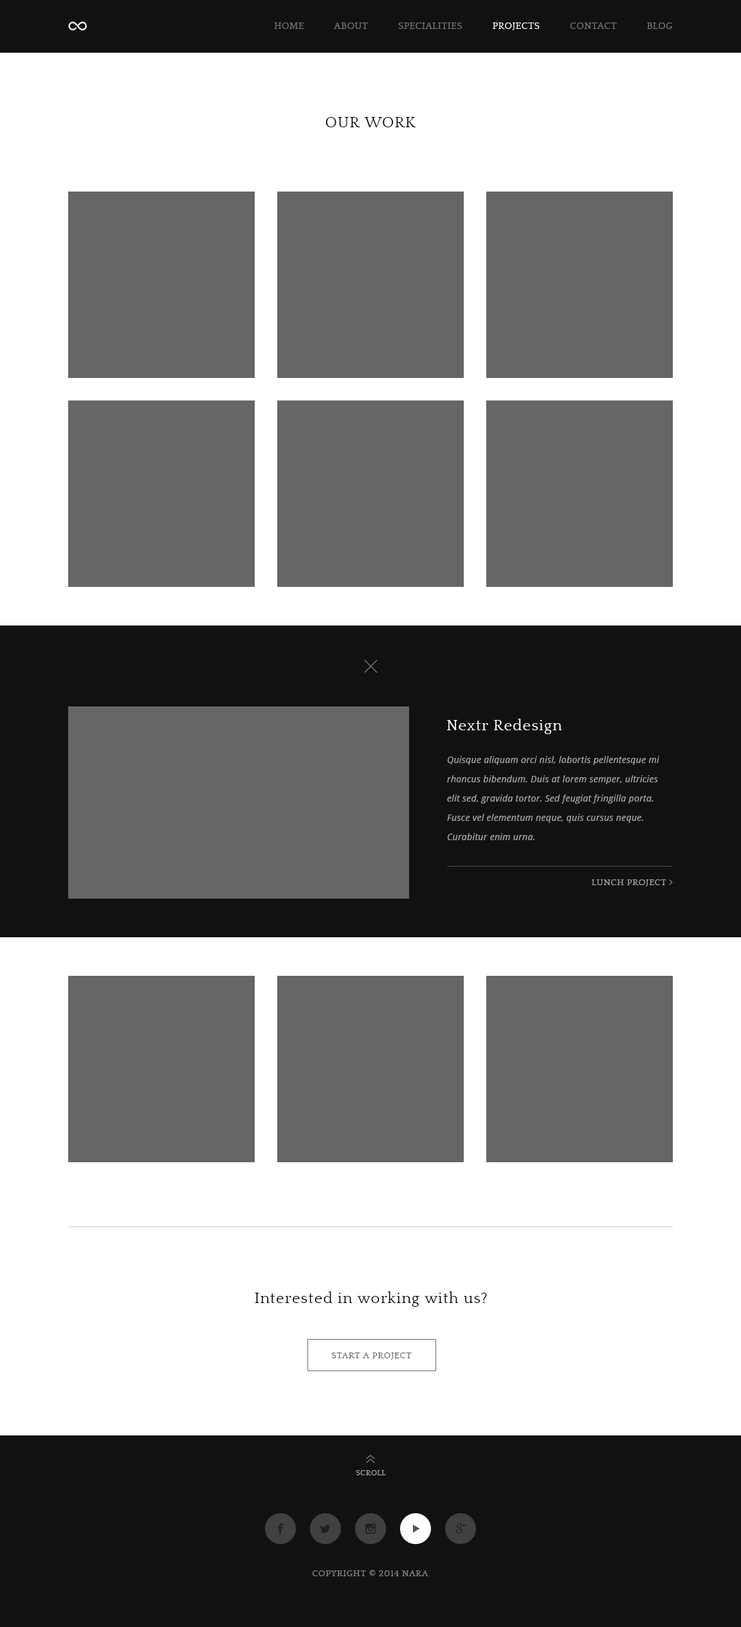
<style>
.page{position:relative;width:741px;height:1627px;background:#ffffff}
.page>*{position:absolute;margin:0}
.t1{font:9.6px "Quattrocento";letter-spacing:0.04em;color:#777777;text-transform:uppercase}
.t2{font:9.6px "Quattrocento";letter-spacing:0.04em;color:#ffffff;text-transform:uppercase}
.t3{font:15.4px "Quattrocento";letter-spacing:0.05em;color:#000000}
.t4{font:15.4px "Quattrocento";letter-spacing:0.05em;color:#ffffff}
.t5{font:9px/19.3px "OpenSans-Italic";letter-spacing:0.025em;color:#a6a6a6}
.t6{font:9px "Quattrocento";letter-spacing:0.05em;color:#a6a6a6}
.t7{font:9px "Quattrocento";letter-spacing:0.05em;color:#666666;text-transform:uppercase}
.t8{font:7.7px "Quattrocento";letter-spacing:0.05em;color:#a6a6a6;text-transform:uppercase}
.t9{font:9px "Quattrocento";letter-spacing:0.05em;color:#888888;text-transform:uppercase}
</style>
<div class="page">
<p class="t1" style="left:274px;top:22px;width:398px;height:8px">HOME           ABOUT           SPECIALITIES           <span class="t2">PROJECTS           </span>CONTACT           BLOG</p>
<p class="t3" style="left:325px;top:117px;width:91px;height:10px">OUR WORK</p>
<p class="t4" style="left:447px;top:719px;width:115px;height:15px">Nextr Redesign</p>
<p class="t5" style="left:447px;top:756px;width:212px;height:84px">Quisque aliquam orci nisl, lobortis pellentesque mi rhoncus bibendum. Duis at lorem semper, ultricies elit sed, gravida tortor. Sed feugiat fringilla porta. Fusce vel elementum neque, quis cursus neque. Curabitur enim urna.</p>
<p class="t6" style="left:591px;top:879px;width:75px;height:8px">LUNCH PROJECT</p>
<p class="t3" style="left:255px;top:1292px;width:232px;height:15px">Interested in working with us?</p>
<p class="t7" style="left:331px;top:1353px;width:80px;height:7px">START A PROJECT</p>
<p class="t8" style="left:356px;top:1470px;width:30px;height:5px">SCROLL</p>
<p class="t9" style="left:312px;top:1570px;width:116px;height:6px">Copyright © 2014 NARA</p>
</div>
